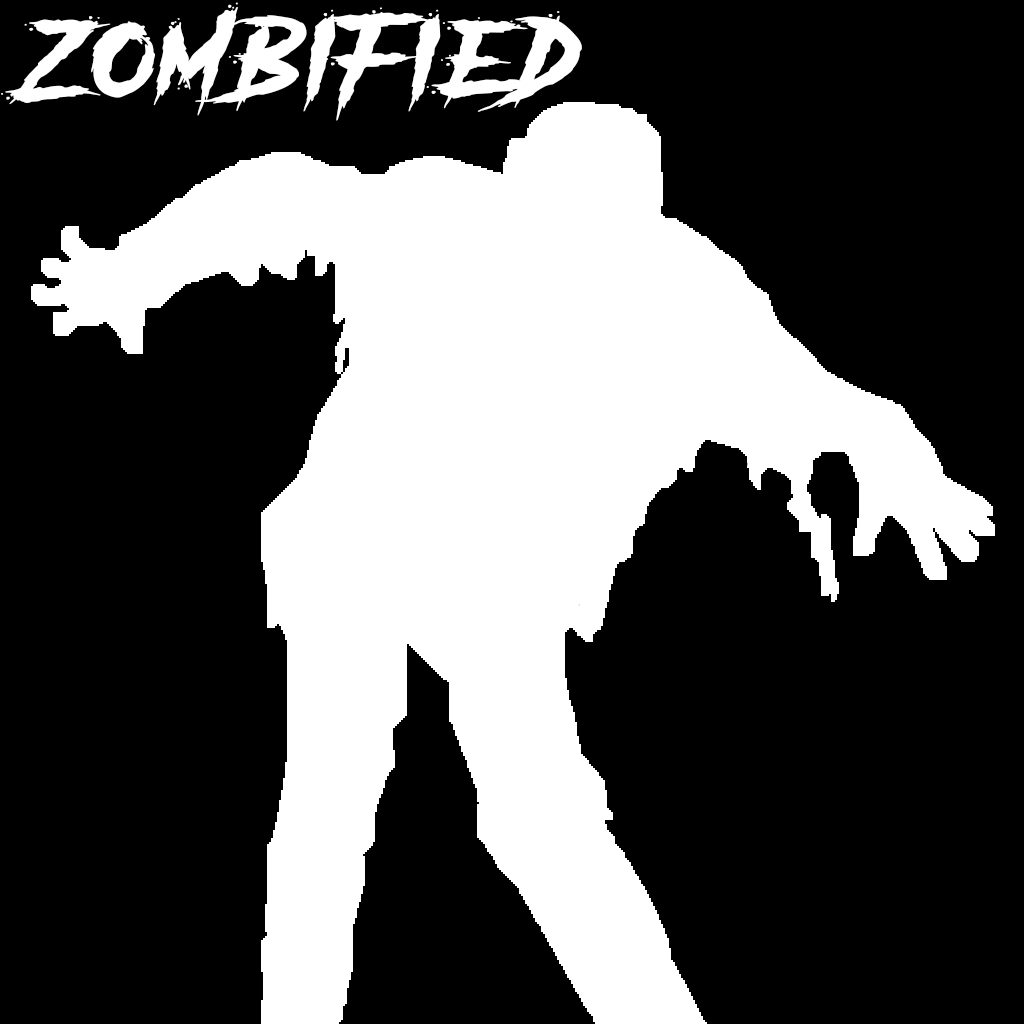
<style>
.page{position:relative;width:1024px;height:1024px;background:#000000}
.page>*{position:absolute;margin:0}
.t1{font:97.2px "AnotherDangerDemo";letter-spacing:0.1em;color:#ffffff;scale:1.18 1}
</style>
<div class="page">
<p class="t1" style="left:1px;top:2px;width:581px;height:119px">zombified</p>
</div>
